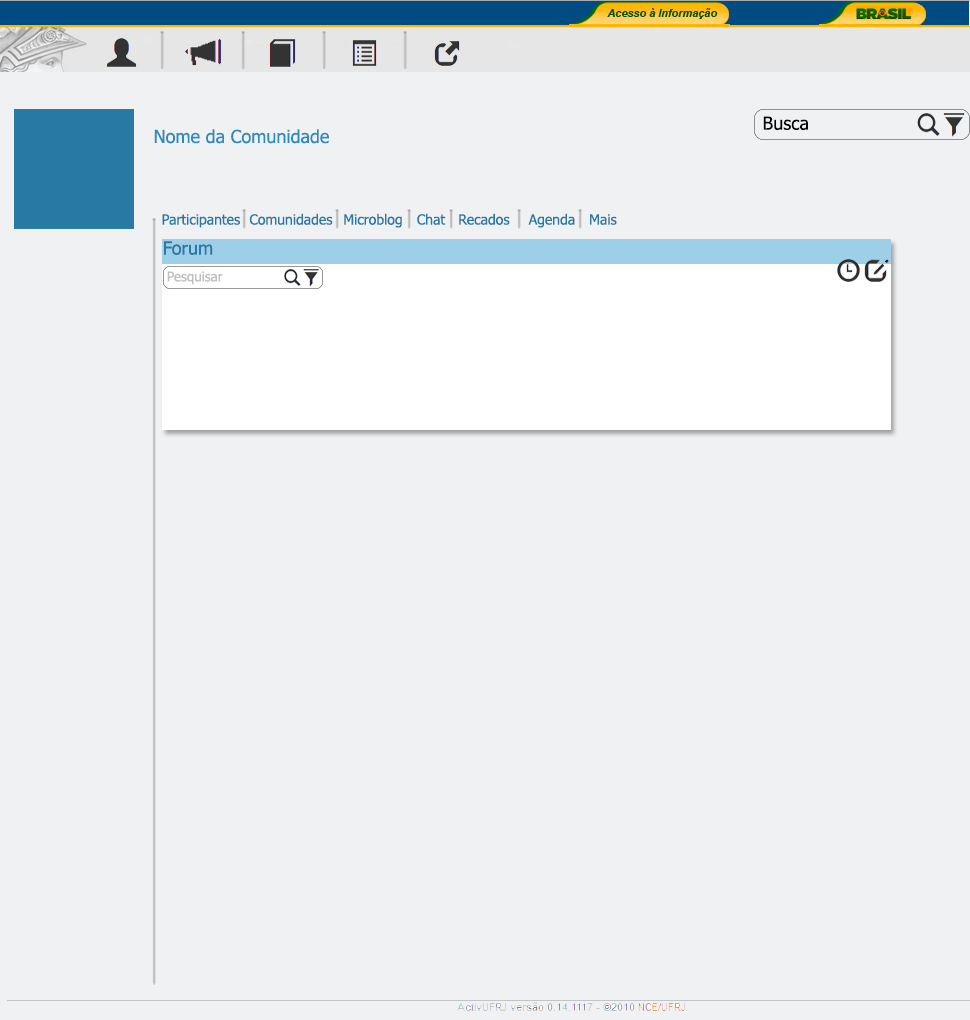
<style>
.page{position:relative;width:970px;height:1020px;background:#eff1f3}
.page>*{position:absolute;margin:0}
.t1{font:18px "Tahoma";color:#040404}
.t2{font:18px "Tahoma";color:#2e8cbd}
.t3{font:14px "Tahoma";color:#2879a3}
.t4{font:18px "Tahoma";color:#2879a3}
.t5{font:13.4px "Tahoma";color:#bfbfbf}
</style>
<div class="page">
<p class="t1" style="left:763px;top:116px;width:45px;height:15px">Busca</p>
<p class="t2" style="left:154px;top:129px;width:175px;height:15px">Nome da Comunidade</p>
<p class="t3" style="left:162px;top:214px;width:78px;height:14px">Participantes</p>
<p class="t3" style="left:249px;top:213px;width:84px;height:12px">Comunidades</p>
<p class="t3" style="left:344px;top:213px;width:58px;height:15px">Microblog</p>
<p class="t3" style="left:417px;top:213px;width:29px;height:12px">Chat</p>
<p class="t3" style="left:459px;top:213px;width:51px;height:12px">Recados</p>
<p class="t3" style="left:528px;top:213px;width:47px;height:15px">Agenda</p>
<p class="t3" style="left:590px;top:214px;width:27px;height:11px">Mais</p>
<p class="t4" style="left:164px;top:241px;width:49px;height:14px">Forum</p>
<p class="t5" style="left:167px;top:271px;width:56px;height:14px">Pesquisar</p>
</div>
